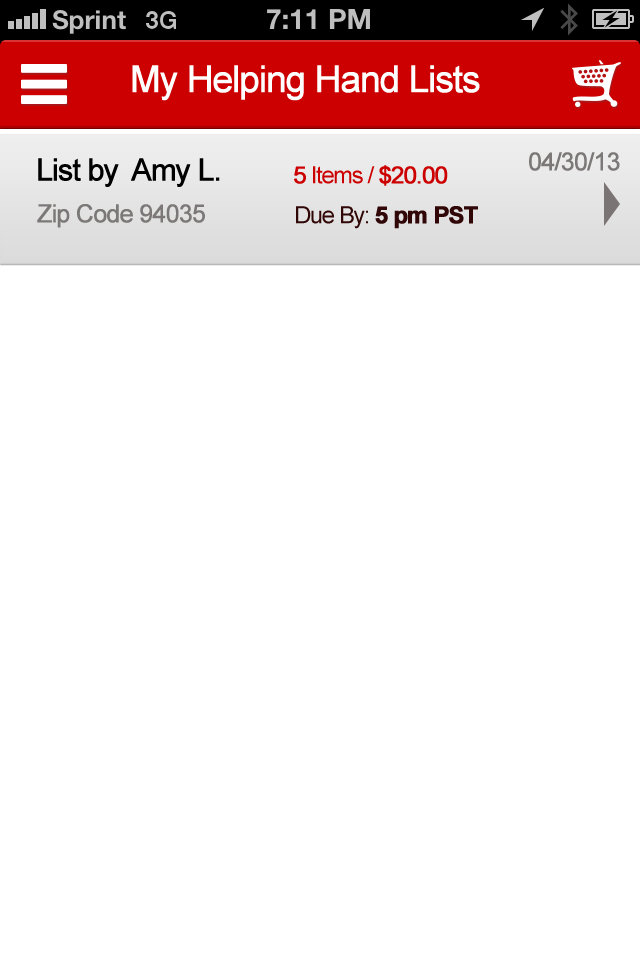
<style>
.page{position:relative;width:640px;height:960px;background:#ffffff}
.page>*{position:absolute;margin:0}
.t1{font:37.1px "ArialMT";letter-spacing:-0.055em;color:#ffffff;font-weight:bold}
.t2{font:30.4px "ArialMT";letter-spacing:-0.055em;color:#000000;font-weight:bold}
.t3{font:25px "ArialMT";letter-spacing:-0.055em;color:#7c7878;font-weight:bold}
.t4{font:23.7px "ArialMT";letter-spacing:-0.055em;color:#cc0000}
.t5{font:23.7px "ArialMT";letter-spacing:-0.055em;color:#cc0000;font-weight:bold}
.t6{font:23.7px "Arial-BoldMT";letter-spacing:-0.055em;color:#300606;font-weight:bold}
.t7{font:23.7px "ArialMT";letter-spacing:-0.055em;color:#300606}
</style>
<div class="page">
<p class="t1" style="left:132px;top:65px;width:348px;height:36px">My Helping Hand Lists</p>
<p class="t2" style="left:38px;top:158px;width:182px;height:29px">List by  Amy L.</p>
<p class="t3" style="left:529px;top:152px;width:91px;height:19px">04/30/13</p>
<p class="t4" style="left:294px;top:165px;width:154px;height:21px"><span class="t5">5</span> Items / <span class="t5">$20.00</span></p>
<p class="t3" style="left:37px;top:204px;width:168px;height:24px">Zip Code 94035</p>
<p class="t6" style="left:296px;top:206px;width:182px;height:23px"><span class="t7">Due By: </span>5 pm PST</p>
</div>
